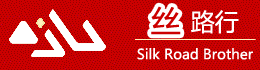
<style>
.page{position:relative;width:260px;height:70px;background:#cc0000}
.page>*{position:absolute;margin:0}
.t1{font:30px "MicrosoftYaHei";color:#cc0000}
.t2{font:24px "MicrosoftYaHei";color:#ffffff}
.t3{font:14px "MicrosoftYaHeiUI";color:#ffffff}
</style>
<div class="page">
<p class="t1" style="left:151px;top:6px;width:30px;height:29px">丝</p>
<p class="t2" style="left:191px;top:10px;width:48px;height:24px">路行</p>
<p class="t3" style="left:137px;top:48px;width:116px;height:12px">Silk Road Brother</p>
</div>
